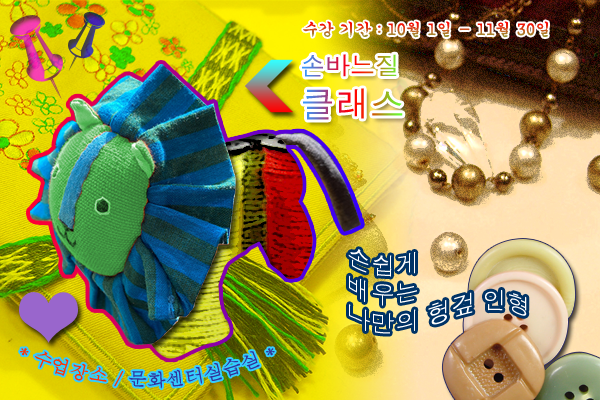
<style>
.page{position:relative;width:600px;height:400px}
.page>*{position:absolute;margin:0}
.t1{font:25px "Dotum"}
.t2{font:35px "Dotum"}
.t3{font:24px "Dotum";color:#ffffff}
.t4{font:18px "Batang";color:#333399}
.t5{font:18px "Batang";color:#ff3300}
</style>
<div class="page">
<p class="t1" style="left:302px;top:54px;width:101px;height:66px">손바느질<br><span class="t2">클래스</span></p>
<p class="t3" style="left:348px;top:249px;width:179px;height:85px">손쉽게<br>배우는<br>나만의 헝겊 인형</p>
<p class="t4" style="left:20px;top:348px;width:255px;height:41px"><span class="t5">* 수업장소 / </span>문화센터실습실 *</p>
</div>
